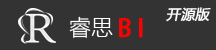
<style>
.page{position:relative;width:216px;height:50px;background:#333333}
.page>*{position:absolute;margin:0}
.t1{font:22px "MicrosoftYaHeiLight";color:#ffffff}
.t2{font:14px "MicrosoftYaHei";color:#fefeff;font-weight:bold;font-style:italic}
.t3{font:24px "AdobeHeitiStd-Regular";letter-spacing:0.2em;color:#fe0000;font-weight:bold}
</style>
<div class="page">
<p class="t1" style="left:69px;top:16px;width:44px;height:22px">睿思</p>
<p class="t2" style="left:166px;top:7px;width:45px;height:15px">开源版</p>
<p class="t3" style="left:119px;top:18px;width:24px;height:20px">BI</p>
</div>
